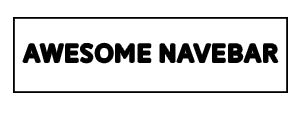
<style>
.page{position:relative;width:300px;height:120px;background:#ffffff}
.page>*{position:absolute;margin:0}
.t1{font:25.4px "Reitam";color:#000000}
</style>
<div class="page">
<p class="t1" style="left:23px;top:43px;width:255px;height:20px">AWESOME NAVEBAR</p>
</div>
